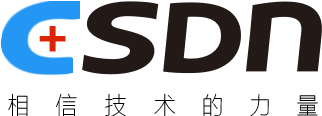
<style>
.page{position:relative;width:322px;height:116px;background:#ffffff}
.page>*{position:absolute;margin:0}
.t1{font:45.6px "ForteMT";letter-spacing:0.11em;color:#da2506;font-weight:bold}
.t2{font:24.6px "FZLTCXHJW--GB1-0";letter-spacing:1.32em;color:#000000;scale:0.89 1}
</style>
<div class="page">
<p class="t1" style="left:39px;top:26px;width:27px;height:26px">+</p>
<p class="t2" style="left:8px;top:93px;width:310px;height:24px">相信技术的力量</p>
</div>
